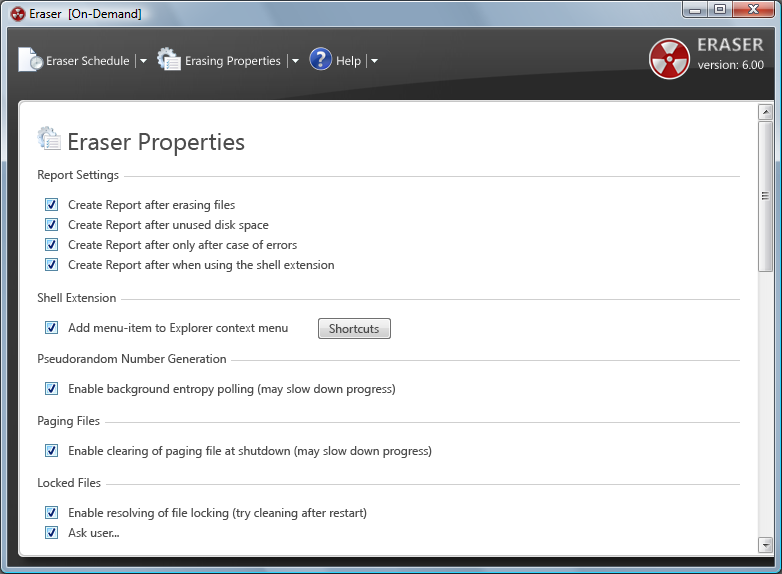
<style>
.page{position:relative;width:782px;height:574px;background:#ffffff}
.page>*{position:absolute;margin:0}
.t1{font:18.4px "SegoeUI-Bold"}
.t2{font:12px "SegoeUI";color:#ffffff}
.t3{font:24px "SegoeUI";color:#4c4c4c}
.t4{font:12px "SegoeUI";color:#4c4c4c}
</style>
<div class="page">
<p class="t1" style="left:698px;top:37px;width:66px;height:15px">ERASER</p>
<p class="t2" style="left:47px;top:56px;width:82px;height:9px">Eraser Schedule</p>
<p class="t2" style="left:186px;top:56px;width:95px;height:12px">Erasing Properties</p>
<p class="t2" style="left:337px;top:56px;width:24px;height:12px">Help</p>
<p class="t2" style="left:698px;top:60px;width:66px;height:9px">version: 6.00</p>
<p class="t3" style="left:69px;top:133px;width:176px;height:23px">Eraser Properties</p>
<p class="t4" style="left:38px;top:170px;width:81px;height:12px">Report Settings</p>
<p class="t4" style="left:68px;top:200px;width:167px;height:12px">Create Report after erasing files</p>
<p class="t4" style="left:68px;top:220px;width:201px;height:12px">Create Report after unused disk space</p>
<p class="t4" style="left:68px;top:240px;width:229px;height:12px">Create Report after only after case of errors</p>
<p class="t4" style="left:68px;top:260px;width:266px;height:12px">Create Report after when using the shell extension</p>
<p class="t4" style="left:37px;top:293px;width:79px;height:9px">Shell Extension</p>
<p class="t4" style="left:68px;top:323px;width:220px;height:12px">Add menu-item to Explorer context menu</p>
<p class="t4" style="left:329px;top:324px;width:50px;height:9px">Shortcuts</p>
<p class="t4" style="left:38px;top:354px;width:188px;height:9px">Pseudorandom Number Generation</p>
<p class="t4" style="left:69px;top:384px;width:326px;height:12px">Enable background entropy polling (may slow down progress)</p>
<p class="t4" style="left:38px;top:416px;width:62px;height:12px">Paging Files</p>
<p class="t4" style="left:69px;top:446px;width:363px;height:12px">Enable clearing of paging file at shutdown (may slow down progress)</p>
<p class="t4" style="left:38px;top:478px;width:63px;height:9px">Locked Files</p>
<p class="t4" style="left:69px;top:508px;width:298px;height:12px">Enable resolving of file locking (try cleaning after restart)</p>
<p class="t4" style="left:68px;top:528px;width:51px;height:9px">Ask user...</p>
</div>
